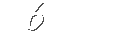
<style>
.page{position:relative;width:128px;height:32px;background:#ffffff}
.page>*{position:absolute;margin:0}
.t1{font:43px "DomDiagonalBT-Regular";letter-spacing:0.075em;color:#ffffff;scale:1.05 1}
</style>
<div class="page">
<p class="t1" style="left:26px;top:2px;width:18px;height:29px">6</p>
</div>
